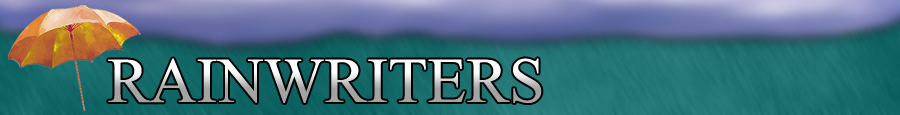
<style>
.page{position:relative;width:900px;height:115px}
.page>*{position:absolute;margin:0}
.t1{font:64px "TimesNewRomanPSMT"}
</style>
<div class="page">
<p class="t1" style="left:108px;top:58px;width:434px;height:45px">RAINWRITERS</p>
</div>
